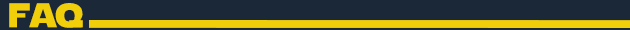
<style>
.page{position:relative;width:630px;height:30px;background:#1b2838}
.page>*{position:absolute;margin:0}
.t1{font:34px "StarJedi";color:#f0ce0a}
</style>
<div class="page">
<p class="t1" style="left:9px;top:3px;width:74px;height:25px">faq</p>
</div>
